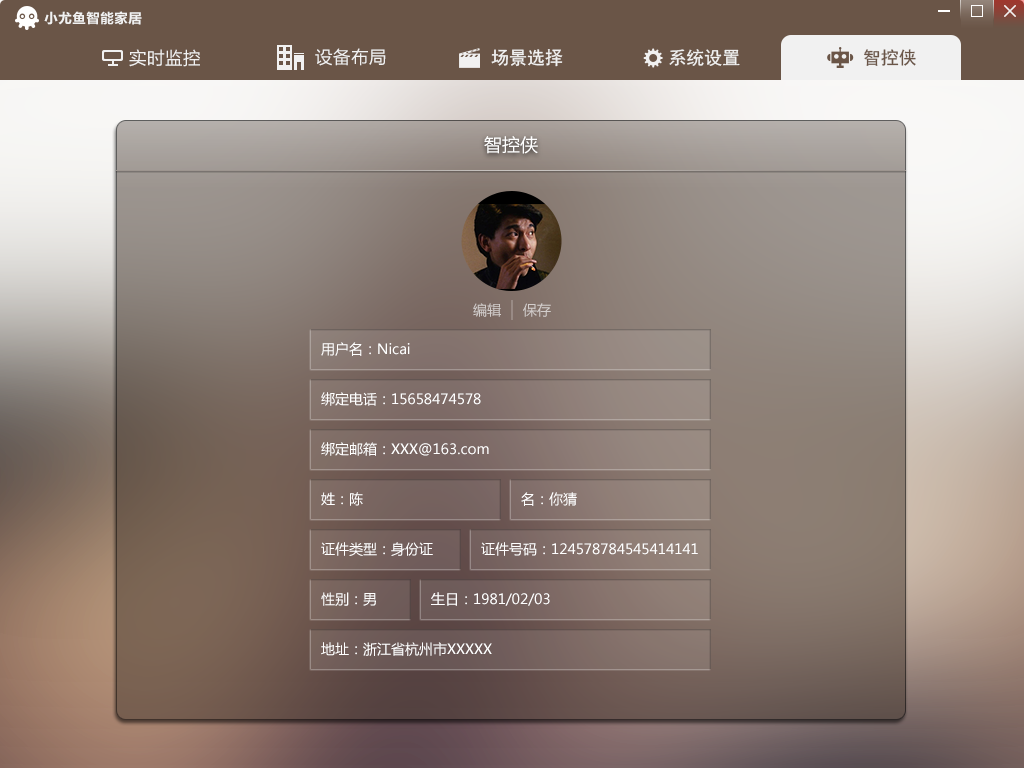
<style>
.page{position:relative;width:1024px;height:768px}
.page>*{position:absolute;margin:0}
.t1{font:14px "FZLTCHK--GBK1-0";color:#f1f1f1}
.t2{font:18px "FZLTHK--GBK1-0";color:#f1f1f1}
.t3{font:18px "SimHei";color:#f1f1f1}
.t4{font:18px "SimHei";color:#6a5547}
.t5{font:18px "MicrosoftYaHei";color:#ffffff}
.t6{font:14px "MicrosoftYaHei";color:#d1ccca}
.t7{font:14px "MicrosoftYaHei";color:#d3cecc}
.t8{font:14px "MicrosoftYaHei";color:#ffffff}
</style>
<div class="page">
<p class="t1" style="left:44px;top:11px;width:98px;height:14px">小尤鱼智能家居</p>
<p class="t2" style="left:129px;top:49px;width:71px;height:18px">实时监控</p>
<p class="t2" style="left:315px;top:48px;width:71px;height:18px">设备布局</p>
<p class="t3" style="left:491px;top:49px;width:72px;height:18px">场景选择</p>
<p class="t3" style="left:669px;top:49px;width:71px;height:17px">系统设置</p>
<p class="t4" style="left:864px;top:49px;width:52px;height:17px">智控侠</p>
<p class="t5" style="left:484px;top:136px;width:54px;height:18px">智控侠</p>
<p class="t6" style="left:473px;top:303px;width:28px;height:14px">编辑</p>
<p class="t7" style="left:523px;top:303px;width:28px;height:14px">保存</p>
<p class="t8" style="left:321px;top:342px;width:89px;height:14px">用户名：Nicai</p>
<p class="t8" style="left:321px;top:392px;width:160px;height:14px">绑定电话：15658474578</p>
<p class="t8" style="left:321px;top:442px;width:168px;height:14px">绑定邮箱：XXX@163.com</p>
<p class="t8" style="left:321px;top:492px;width:42px;height:14px">姓：陈</p>
<p class="t8" style="left:521px;top:492px;width:56px;height:14px">名：你猜</p>
<p class="t8" style="left:321px;top:542px;width:112px;height:14px">证件类型：身份证</p>
<p class="t8" style="left:481px;top:542px;width:217px;height:14px">证件号码：124578784545414141</p>
<p class="t8" style="left:321px;top:592px;width:55px;height:14px">性别：男</p>
<p class="t8" style="left:431px;top:592px;width:119px;height:14px">生日：1981/02/03</p>
<p class="t8" style="left:321px;top:642px;width:171px;height:14px">地址：浙江省杭州市XXXXX</p>
</div>
